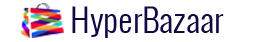
<style>
.page{position:relative;width:280px;height:42px;background:#ffffff}
.page>*{position:absolute;margin:0}
.t1{font:31px "Oswald-Light";color:#120944;scale:1.15 1}
</style>
<div class="page">
<p class="t1" style="left:72px;top:6px;width:152px;height:32px">HyperBazaar</p>
</div>
